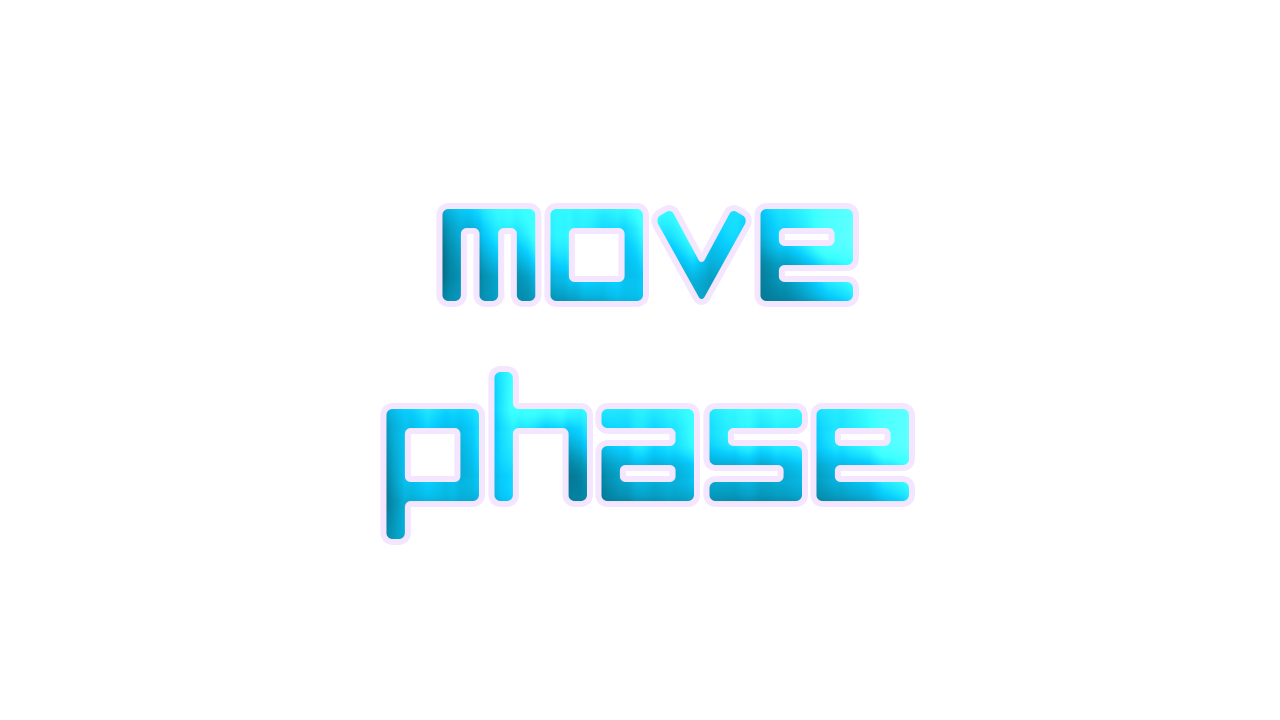
<style>
.page{position:relative;width:1280px;height:720px;background:#ffffff}
.page>*{position:absolute;margin:0}
.t1{font:166.7px "LuggageRoundRegular"}
</style>
<div class="page">
<p class="t1" style="left:386px;top:209px;width:523px;height:330px;text-align:center">MOve<br>phase</p>
</div>
